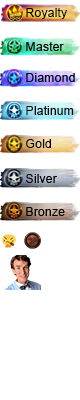
<style>
.page{position:relative;width:80px;height:400px;background:#ffffff}
.page>*{position:absolute;margin:0}
.t1{font:12.5px "ArialMT";color:#000000}
</style>
<div class="page">
<p class="t1" style="left:26px;top:8px;width:41px;height:11px">Royalty</p>
<p class="t1" style="left:26px;top:42px;width:38px;height:9px">Master</p>
<p class="t1" style="left:26px;top:73px;width:49px;height:9px">Diamond</p>
<p class="t1" style="left:26px;top:106px;width:48px;height:9px">Platinum</p>
<p class="t1" style="left:26px;top:139px;width:25px;height:9px">Gold</p>
<p class="t1" style="left:26px;top:174px;width:31px;height:9px">Silver</p>
<p class="t1" style="left:26px;top:207px;width:39px;height:9px">Bronze</p>
</div>
